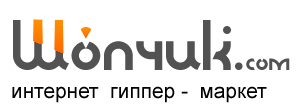
<style>
.page{position:relative;width:297px;height:105px;background:#ffffff}
.page>*{position:absolute;margin:0}
.t1{font:62.5px "Sabomaster";color:#525252}
.t2{font:25px "Sabomaster";color:#525252}
.t3{font:20.8px "ArialMT";color:#000000}
</style>
<div class="page">
<p class="t1" style="left:13px;top:20px;width:277px;height:50px">Шопчик.<span class="t2">com</span></p>
<p class="t3" style="left:12px;top:86px;width:255px;height:17px">интернет  гиппер -  маркет</p>
</div>
